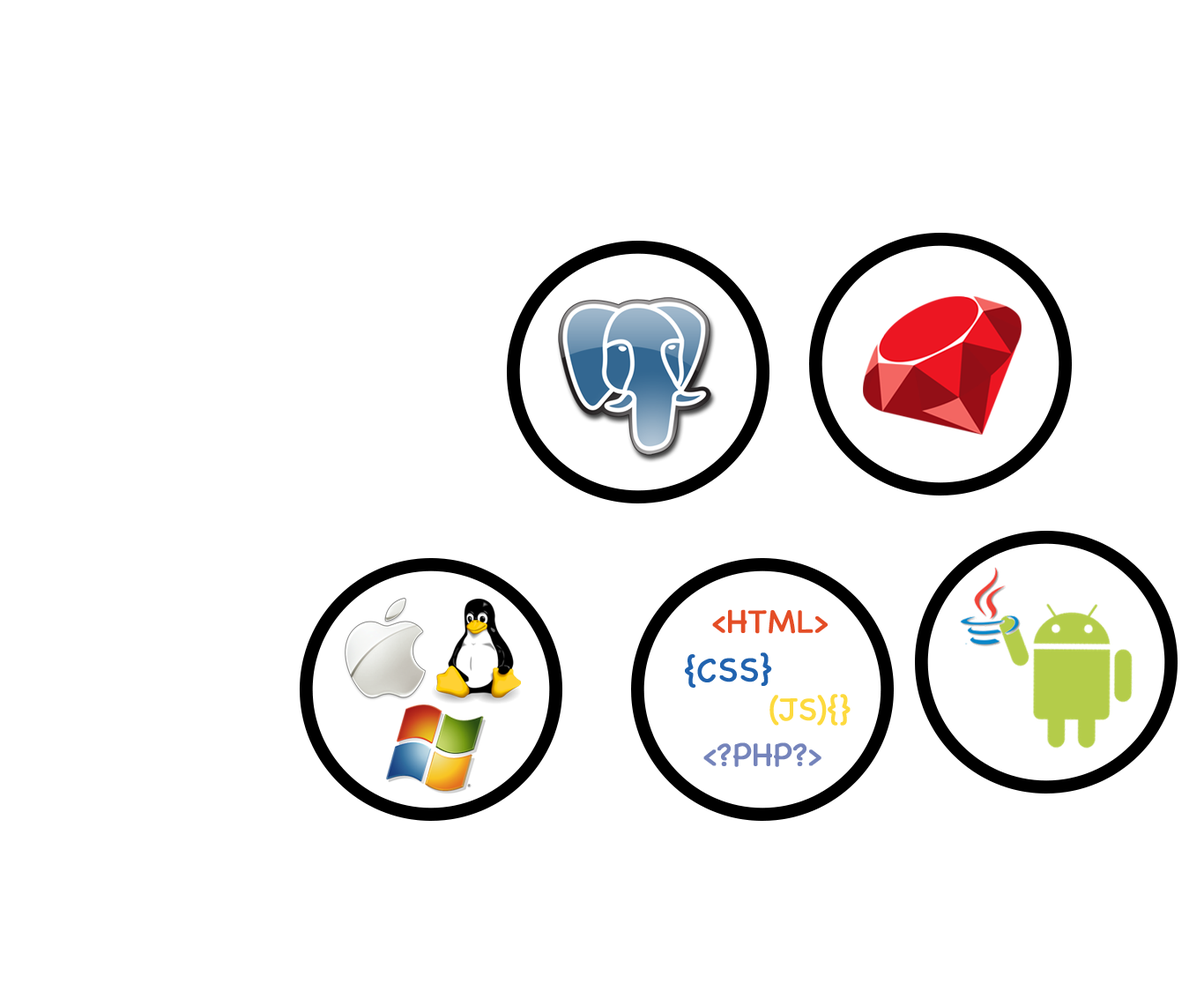
<style>
.page{position:relative;width:1204px;height:991px;background:#ffffff}
.page>*{position:absolute;margin:0}
.t1{font:32.9px "Chalkboard";color:#e44d26;font-weight:bold}
.t2{font:34px "Chalkboard";color:#2163af;font-weight:bold}
.t3{font:31.8px "Chalkboard";color:#fdda3e;font-weight:bold}
.t4{font:32.3px "Chalkboard";color:#7584bb;font-weight:bold}
</style>
<div class="page">
<p class="t1" style="left:712px;top:609px;width:116px;height:25px">&lt;HTML&gt;</p>
<p class="t2" style="left:685px;top:652px;width:87px;height:35px;rotate:-1deg">{CSS}</p>
<p class="t3" style="left:769px;top:694px;width:81px;height:31px">(JS){}</p>
<p class="t4" style="left:703px;top:742px;width:118px;height:25px">&lt;?PHP?&gt;</p>
</div>
